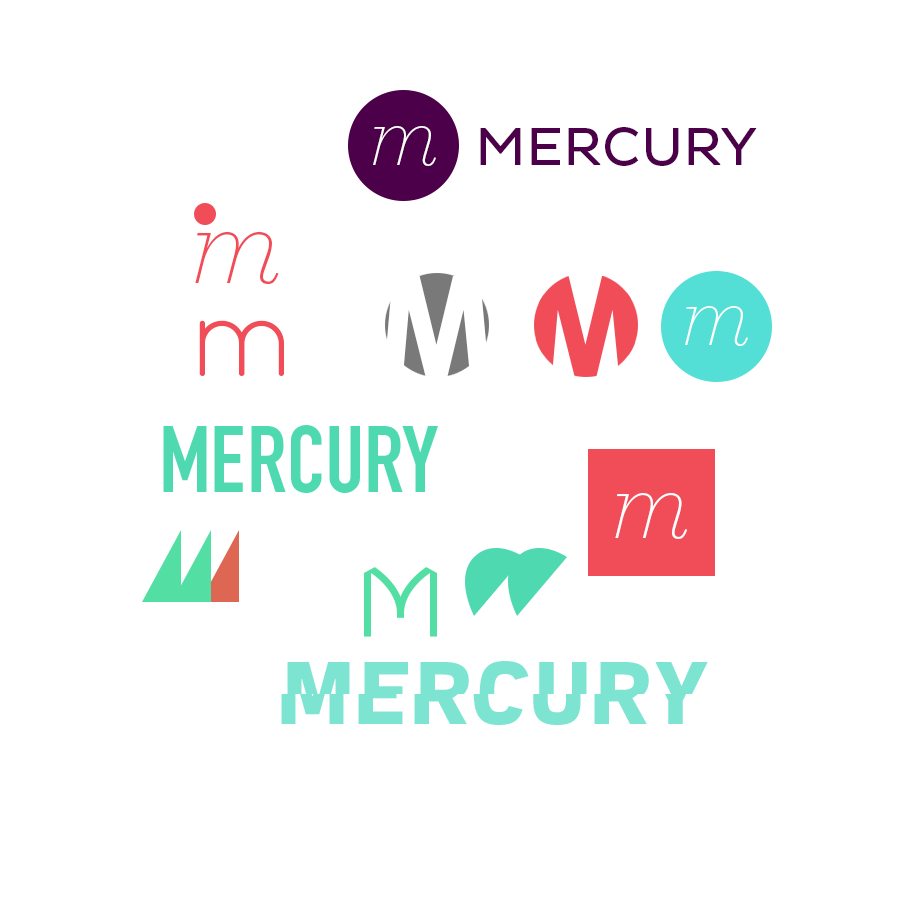
<style>
.page{position:relative;width:900px;height:900px;background:#ffffff}
.page>*{position:absolute;margin:0}
.t1{font:93px "Archer-ExtraLightItalic";color:#ffffff}
.t2{font:54px "PlutoSansRegular";color:#4b0049;text-transform:uppercase}
.t3{font:122px "Archer-ExtraLightItalic";color:#f04d58}
.t4{font:138px "Exo-Bold";color:#ffffff;text-transform:uppercase}
.t5{font:113px "QuicksandBook-Regular";color:#f04d58}
.t6{font:106px "Archer-ExtraLightItalic";color:#ffffff}
</style>
<div class="page">
<p class="t1" style="left:373px;top:126px;width:63px;height:40px">m</p>
<p class="t2" style="left:480px;top:127px;width:277px;height:39px">mercury</p>
<p class="t3" style="left:195px;top:231px;width:84px;height:53px">m</p>
<p class="t4" style="left:383px;top:276px;width:107px;height:101px">M</p>
<p class="t1" style="left:685px;top:306px;width:63px;height:40px">m</p>
<p class="t5" style="left:199px;top:320px;width:85px;height:57px">m</p>
<p class="t6" style="left:615px;top:493px;width:73px;height:46px">m</p>
</div>
